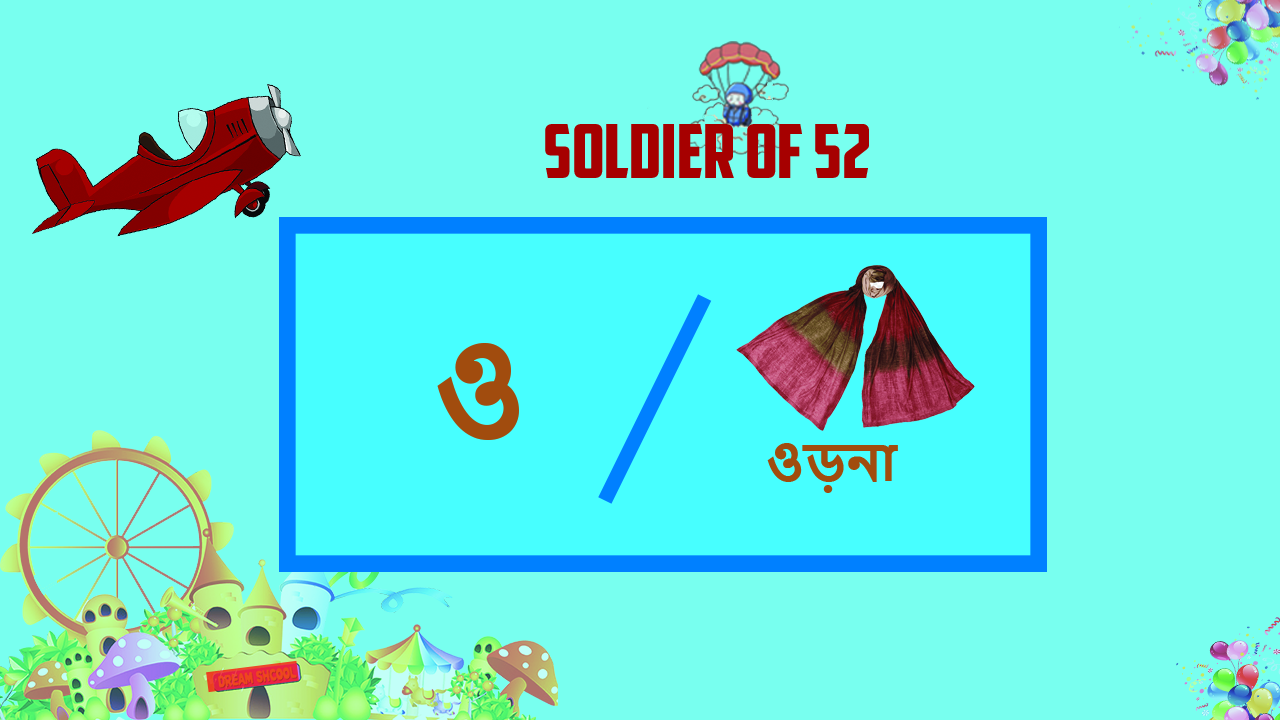
<style>
.page{position:relative;width:1280px;height:720px;background:#78ffef}
.page>*{position:absolute;margin:0}
.t1{font:74.5px "AmericanCaptain";color:#a60000}
.t2{font:122.1px "NirmalaUI-Bold";color:#a24b0d}
.t3{font:49.7px "NirmalaUI-Bold";color:#a24b0d}
</style>
<div class="page">
<p class="t1" style="left:545px;top:124px;width:324px;height:54px">SOLDIER OF 52</p>
<p class="t2" style="left:437px;top:343px;width:82px;height:97px">ও</p>
<p class="t3" style="left:767px;top:443px;width:131px;height:50px">ওড়না</p>
</div>
